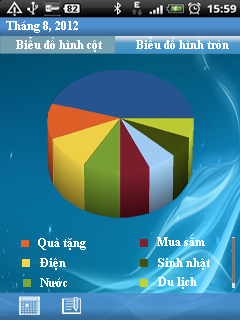
<style>
.page{position:relative;width:240px;height:320px}
.page>*{position:absolute;margin:0}
.t1{font:11.6px "TimesNewRomanPS-BoldMT";color:#ffffff}
</style>
<div class="page">
<p class="t1" style="left:6px;top:21px;width:72px;height:12px">Tháng 8, 2012</p>
<p class="t1" style="left:16px;top:37px;width:86px;height:15px">Biểu đồ hình cột</p>
<p class="t1" style="left:136px;top:37px;width:93px;height:12px">Biểu đồ hình tròn</p>
<p class="t1" style="left:38px;top:238px;width:48px;height:12px">Quà tặng</p>
<p class="t1" style="left:157px;top:234px;width:48px;height:12px">Mua sắm</p>
<p class="t1" style="left:40px;top:258px;width:26px;height:12px">Điện</p>
<p class="t1" style="left:158px;top:258px;width:52px;height:12px">Sinh nhật</p>
<p class="t1" style="left:40px;top:278px;width:27px;height:9px">Nước</p>
<p class="t1" style="left:158px;top:277px;width:39px;height:12px">Du lịch</p>
</div>
